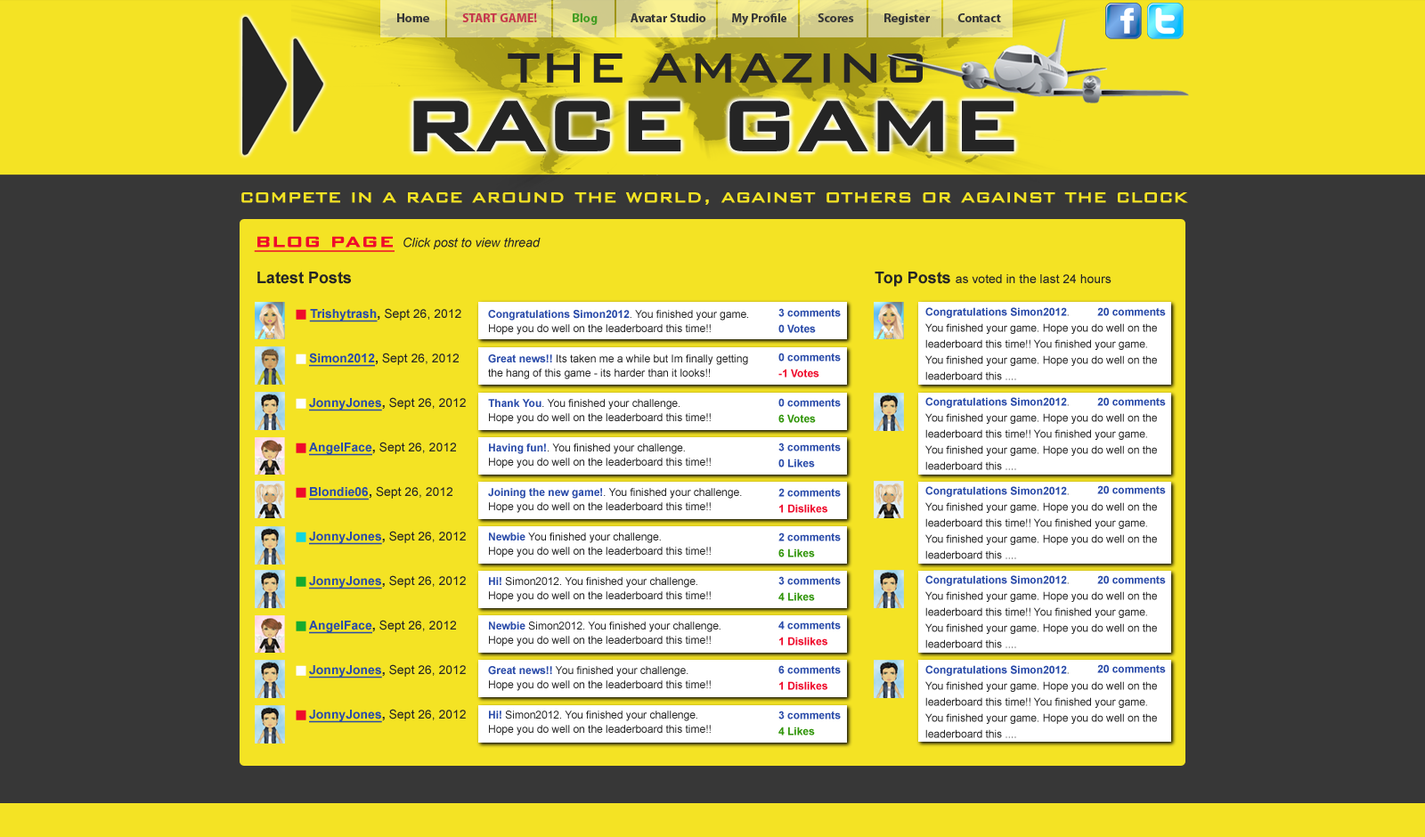
<style>
.page{position:relative;width:1425px;height:837px;background:#373737}
.page>*{position:absolute;margin:0}
.t1{font:12.5px "MyriadPro-Bold";color:#373737}
.t2{font:12.5px "MyriadPro-Bold";color:#c6384b}
.t3{font:12.5px "MyriadPro-Bold";color:#449e24}
.t4{font:53.7px "BankGothic-Light";color:#252525;font-weight:bold}
.t5{font:93.1px "BankGothic-Medium";letter-spacing:-0.05em;color:#252525;font-weight:bold}
.t6{font:22.4px "BankGothic-Light";color:#f4e324;font-weight:bold}
.t7{font:12.6px "Arial-ItalicMT";color:#252525}
.t8{font:20.1px "BankGothic-Medium";color:#ef0b2b;font-weight:bold;text-decoration:underline}
.t9{font:16px "Arial-BoldMT";color:#252525}
.t10{font:12.5px "ArialMT";color:#252525}
.t11{font:10.7px/14.2px "ArialMT";color:#252525}
.t12{font:10.7px/26.7px "ZapfDingbatsITCbyBT-Regular";color:#ef0b2b}
.t13{font:12.5px/26.7px "Arial-BoldMT";color:#2a4ba9;text-decoration:underline}
.t14{font:12.5px/26.7px "Arial-BoldMT";color:#252525}
.t15{font:12.5px/26.7px "ArialMT";color:#252525}
.t16{font:10.7px/26.7px "Arial-BoldMT";color:#2a4ba9}
.t17{font:10.7px/26.7px "ArialMT";color:#252525}
.t18{font:10.7px/26.7px "ZapfDingbatsITCbyBT-Regular";color:#fefefe}
.t19{font:12.5px/30.3px "Arial-BoldMT";color:#2a4ba9;text-decoration:underline}
.t20{font:12.5px/30.3px "Arial-BoldMT";color:#252525}
.t21{font:12.5px/30.3px "ArialMT";color:#252525}
.t22{font:10.7px/30.3px "Arial-BoldMT";color:#2a4ba9}
.t23{font:10.7px/30.3px "ArialMT";color:#252525}
.t24{font:10.7px/26.7px "ZapfDingbatsITCbyBT-Regular";color:#ffffff}
.t25{font:10.7px/26.7px "ZapfDingbatsITCbyBT-Regular";color:#11d7de}
.t26{font:10.7px/26.7px "ZapfDingbatsITCbyBT-Regular";color:#15ab2e}
.t27{font:10.7px/16px "Arial-BoldMT";color:#2a4ba9}
.t28{font:10.7px/16px "ArialMT";color:#252525}
.t29{font:10.7px "Arial-BoldMT";color:#2a4ba9}
.t30{font:10.7px "ArialMT";color:#252525}
.t31{font:10.7px/16px "Arial-BoldMT";color:#ef0b2b}
.t32{font:10.7px/16px "Arial-BoldMT";color:#309509}
</style>
<div class="page">
<p class="t1" style="left:397px;top:13px;width:604px;height:12px">Home             <span class="t2">START GAME!              </span><span class="t3">Blog             </span>Avatar Studio          My Profile            Scores            Register           Contact</p>
<p class="t4" style="left:508px;top:53px;width:414px;height:30px">THE AMAZING</p>
<p class="t5" style="left:413px;top:101px;width:601px;height:50px">RACE GAME</p>
<p class="t6" style="left:241px;top:192px;width:947px;height:13px">compete in a race around the world, against others or against the clock</p>
<p class="t7" style="left:254px;top:236px;width:286px;height:16px"><span class="t8">BLOG PAGE </span>Click post to view thread</p>
<p class="t9" style="left:257px;top:272px;width:94px;height:12px">Latest Posts</p>
<p class="t10" style="left:874px;top:272px;width:237px;height:15px"><span class="t9">Top Posts </span>as voted in the last 24 hours</p>
<p class="t11" style="left:296px;top:308px;width:452px;height:427px"><span class="t12">n </span><span class="t13">Trishytrash</span><span class="t14">, </span><span class="t15">Sept 26, 2012 </span><span class="t16">Congratulations Simon2012</span><span class="t17">. You finished your game. <br></span>      Hope you do well on the leaderboard this time!!<br><span class="t18">n </span><span class="t19">Simon2012</span><span class="t20">, </span><span class="t21">Sept 26, 2012 </span><span class="t22">Great news!! </span><span class="t23">Its taken me a while but Im finally getting <br></span>      the hang of this game - its harder than it looks!!<br><span class="t24">n </span><span class="t19">JonnyJones</span><span class="t20">, </span><span class="t21">Sept 26, 2012 </span><span class="t22">Thank You</span><span class="t23">. You finished your challenge. <br></span>      Hope you do well on the leaderboard this time!!<br><span class="t12">n </span><span class="t19">AngelFace</span><span class="t20">, </span><span class="t21">Sept 26, 2012 </span><span class="t22">Having fun!</span><span class="t23">. You finished your challenge. <br></span>      Hope you do well on the leaderboard this time!!<br><span class="t12">n </span><span class="t19">Blondie06</span><span class="t20">, </span><span class="t21">Sept 26, 2012  </span><span class="t22">Joining the new game!</span><span class="t23">. You finished your challenge. <br></span>      Hope you do well on the leaderboard this time!!<br><span class="t25">n </span><span class="t19">JonnyJones</span><span class="t20">, </span><span class="t21">Sept 26, 2012 </span><span class="t22">Newbie </span><span class="t23">You finished your challenge. <br></span>      Hope you do well on the leaderboard this time!!<br><span class="t26">n </span><span class="t19">JonnyJones</span><span class="t20">, </span><span class="t21">Sept 26, 2012 </span><span class="t22">Hi! </span><span class="t23">Simon2012. You finished your challenge.<br></span>      Hope you do well on the leaderboard this time!!<br><span class="t26">n </span><span class="t19">AngelFace</span><span class="t20">, </span><span class="t21">Sept 26, 2012 </span><span class="t22">Newbie </span><span class="t23">Simon2012. You finished your challenge. <br></span>      Hope you do well on the leaderboard this time!!<br><span class="t24">n </span><span class="t19">JonnyJones</span><span class="t20">, </span><span class="t21">Sept 26, 2012 </span><span class="t22">Great news!!</span><span class="t23"> You finished your challenge. <br></span>      Hope you do well on the leaderboard this time!!<br><span class="t12">n </span><span class="t19">JonnyJones</span><span class="t20">, </span><span class="t21">Sept 26, 2012 </span><span class="t22">Hi! </span><span class="t23">Simon2012. You finished your challenge.<br></span>      Hope you do well on the leaderboard this time!!</p>
<p class="t27" style="left:778px;top:308px;width:63px;height:25px">3 comments<br>0 Votes</p>
<p class="t28" style="left:925px;top:307px;width:232px;height:73px"><span class="t29">Congratulations Simon2012</span><span class="t30">. <br></span>You finished your game. Hope you do well on the leaderboard this time!! You finished your game. You finished your game. Hope you do well on the leaderboard this ....</p>
<p class="t29" style="left:1097px;top:307px;width:69px;height:9px">20 comments</p>
<p class="t27" style="left:778px;top:353px;width:63px;height:25px">0 comments<br><span class="t31">-1 Votes</span></p>
<p class="t27" style="left:778px;top:398px;width:63px;height:25px">0 comments<br><span class="t32">6 Votes</span></p>
<p class="t28" style="left:925px;top:397px;width:232px;height:73px"><span class="t29">Congratulations Simon2012</span><span class="t30">. <br></span>You finished your game. Hope you do well on the leaderboard this time!! You finished your game. You finished your game. Hope you do well on the leaderboard this ....</p>
<p class="t29" style="left:1097px;top:397px;width:69px;height:9px">20 comments</p>
<p class="t27" style="left:778px;top:443px;width:63px;height:24px">3 comments<br>0 Likes</p>
<p class="t29" style="left:1097px;top:485px;width:69px;height:9px">20 comments</p>
<p class="t27" style="left:778px;top:488px;width:63px;height:25px">2 comments<br><span class="t31">1 Dislikes</span></p>
<p class="t28" style="left:925px;top:486px;width:232px;height:73px"><span class="t29">Congratulations Simon2012</span><span class="t30">. <br></span>You finished your game. Hope you do well on the leaderboard this time!! You finished your game. You finished your game. Hope you do well on the leaderboard this ....</p>
<p class="t27" style="left:778px;top:532px;width:63px;height:25px">2 comments<br><span class="t32">6 Likes</span></p>
<p class="t27" style="left:778px;top:576px;width:63px;height:25px">3 comments<br><span class="t32">4 Likes</span></p>
<p class="t28" style="left:925px;top:575px;width:232px;height:73px"><span class="t29">Congratulations Simon2012</span><span class="t30">. <br></span>You finished your game. Hope you do well on the leaderboard this time!! You finished your game. You finished your game. Hope you do well on the leaderboard this ....</p>
<p class="t29" style="left:1097px;top:575px;width:69px;height:9px">20 comments</p>
<p class="t27" style="left:778px;top:621px;width:63px;height:25px">4 comments<br><span class="t31">1 Dislikes</span></p>
<p class="t27" style="left:778px;top:665px;width:63px;height:25px">6 comments<br><span class="t31">1 Dislikes</span></p>
<p class="t28" style="left:925px;top:665px;width:232px;height:73px"><span class="t29">Congratulations Simon2012</span><span class="t30">. <br></span>You finished your game. Hope you do well on the leaderboard this time!! You finished your game. You finished your game. Hope you do well on the leaderboard this ....</p>
<p class="t29" style="left:1097px;top:664px;width:69px;height:9px">20 comments</p>
<p class="t27" style="left:778px;top:711px;width:63px;height:24px">3 comments<br><span class="t32">4 Likes</span></p>
</div>
